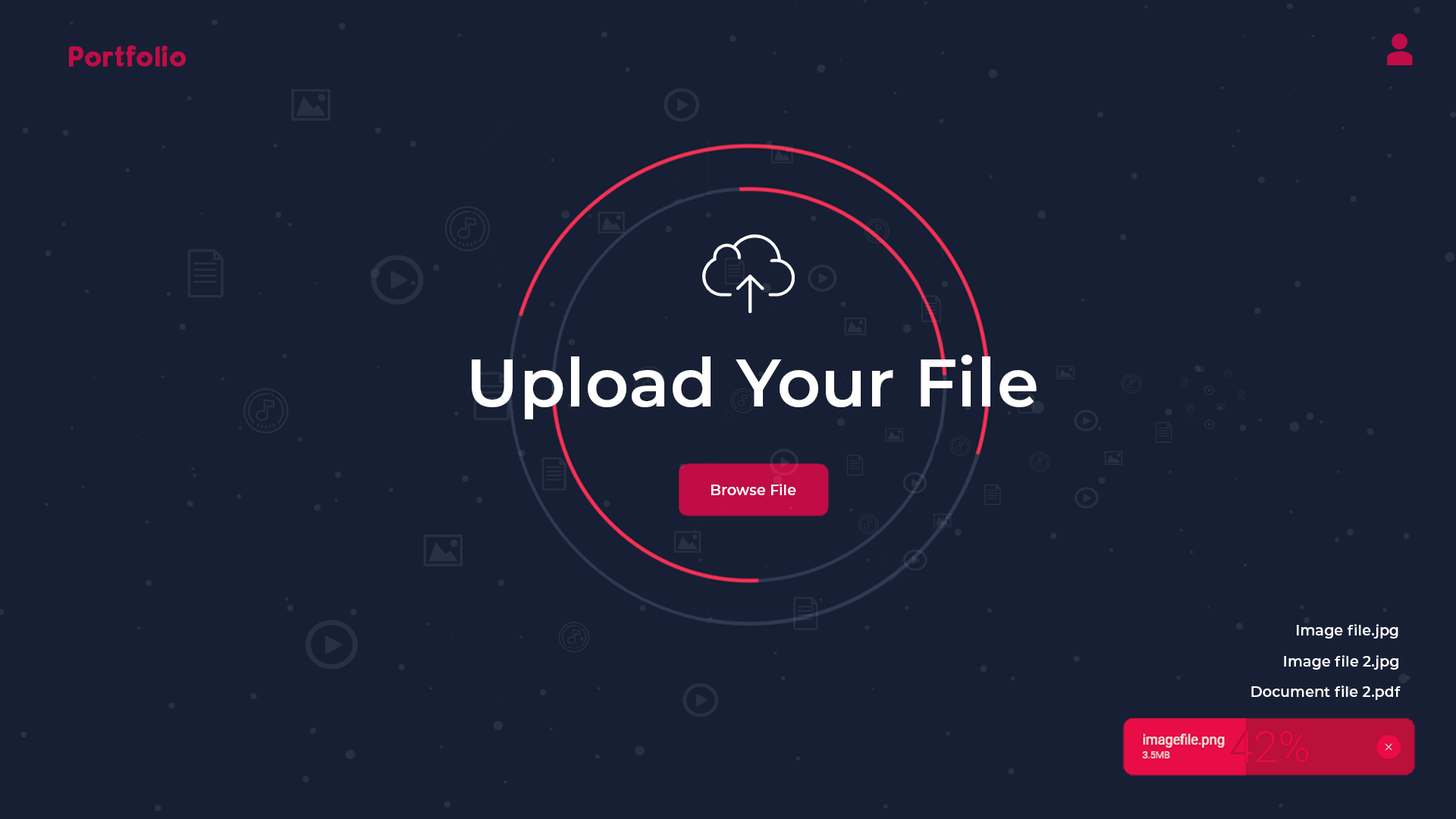
<style>
.page{position:relative;width:1456px;height:819px;background:#171f34}
.page>*{position:absolute;margin:0}
.t1{font:27.7px "Fonarto";color:#c10c46;font-weight:bold}
.t2{font:67px "Montserrat-SemiBold";letter-spacing:0.008em;color:#ffffff}
.t3{font:14.3px "Montserrat-SemiBold";letter-spacing:0.008em;color:#ffffff}
</style>
<div class="page">
<p class="t1" style="left:69px;top:45px;width:117px;height:22px">Portfolio</p>
<p class="t2" style="left:472px;top:354px;width:565px;height:65px">Upload Your File</p>
<p class="t3" style="left:711px;top:484px;width:85px;height:11px">Browse File</p>
<p class="t3" style="left:1297px;top:624px;width:101px;height:15px">Image file.jpg</p>
<p class="t3" style="left:1284px;top:655px;width:114px;height:15px">Image file 2.jpg</p>
<p class="t3" style="left:1251px;top:686px;width:150px;height:14px">Document file 2.pdf</p>
</div>
